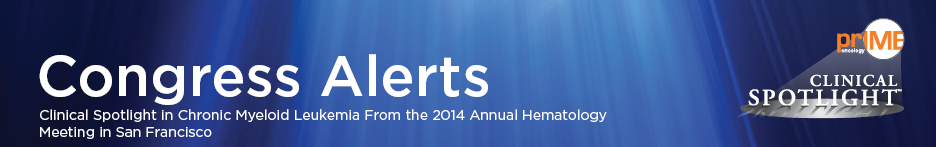
<style>
.page{position:relative;width:936px;height:147px}
.page>*{position:absolute;margin:0}
.t1{font:14px "Gotham-Book";color:#ffffff}
</style>
<div class="page">
<p class="t1" style="left:40px;top:109px;width:567px;height:30px">Clinical Spotlight in Chronic Myeloid Leukemia From the 2014 Annual Hematology <br>Meeting in San Francisco</p>
</div>
